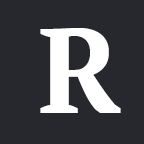
<style>
.page{position:relative;width:144px;height:144px;background:#26282d}
.page>*{position:absolute;margin:0}
.t1{font:120px "PTSerif-Bold";color:#ffffff}
</style>
<div class="page">
<p class="t1" style="left:40px;top:28px;width:81px;height:85px">R</p>
</div>
